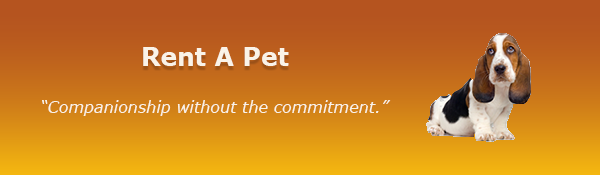
<style>
.page{position:relative;width:600px;height:175px}
.page>*{position:absolute;margin:0}
.t1{font:25px "Verdana-Bold";color:#faf3e8}
.t2{font:16px "Verdana-Italic";color:#faf3e8}
</style>
<div class="page">
<p class="t1" style="left:143px;top:47px;width:146px;height:19px">Rent A Pet</p>
<p class="t2" style="left:42px;top:100px;width:349px;height:16px">“Companionship without the commitment.”</p>
</div>
